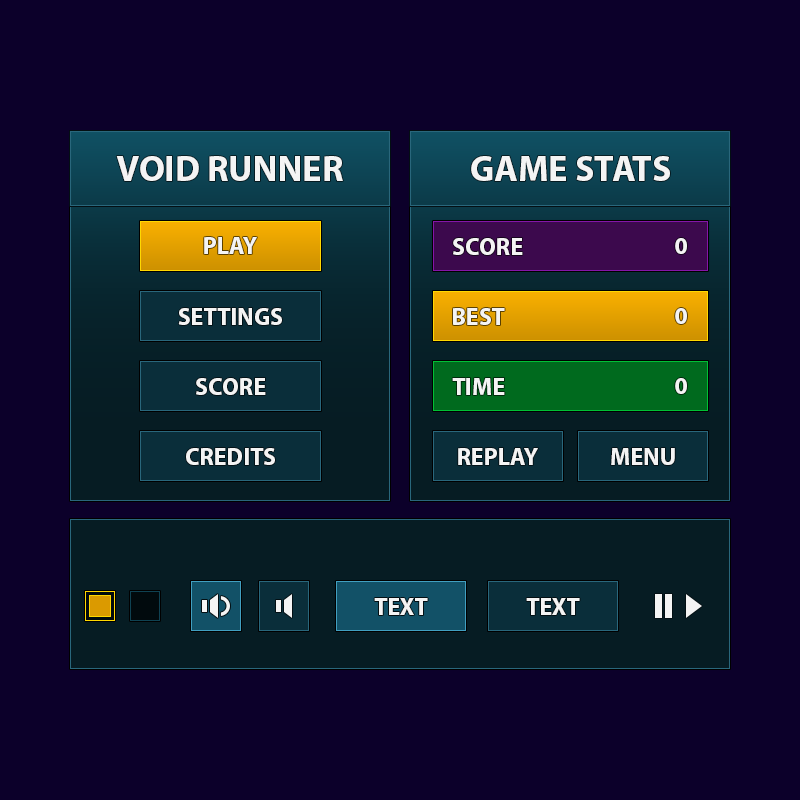
<style>
.page{position:relative;width:800px;height:800px;background:#0c002a}
.page>*{position:absolute;margin:0}
.t1{font:36px "MyriadHebrew-Bold";color:#f4f4f4}
.t2{font:24px "MyriadHebrew-Bold";color:#f4f4f4}
</style>
<div class="page">
<p class="t1" style="left:116px;top:156px;width:227px;height:25px">VOID RUNNER</p>
<p class="t1" style="left:471px;top:156px;width:199px;height:25px">GAME STATS</p>
<p class="t2" style="left:204px;top:237px;width:53px;height:17px">PLAY</p>
<p class="t2" style="left:453px;top:238px;width:70px;height:17px">SCORE</p>
<p class="t2" style="left:675px;top:238px;width:12px;height:16px">0</p>
<p class="t2" style="left:178px;top:308px;width:104px;height:17px">SETTINGS</p>
<p class="t2" style="left:453px;top:308px;width:52px;height:17px">BEST</p>
<p class="t2" style="left:675px;top:308px;width:12px;height:16px">0</p>
<p class="t2" style="left:196px;top:378px;width:70px;height:17px">SCORE</p>
<p class="t2" style="left:452px;top:378px;width:53px;height:17px">TIME</p>
<p class="t2" style="left:675px;top:378px;width:12px;height:16px">0</p>
<p class="t2" style="left:186px;top:448px;width:89px;height:17px">CREDITS</p>
<p class="t2" style="left:458px;top:448px;width:80px;height:17px">REPLAY</p>
<p class="t2" style="left:611px;top:448px;width:64px;height:17px">MENU</p>
<p class="t2" style="left:374px;top:598px;width:54px;height:17px">TEXT</p>
<p class="t2" style="left:526px;top:598px;width:54px;height:17px">TEXT</p>
</div>
